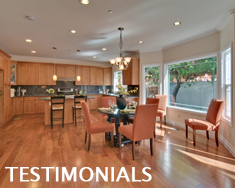
<style>
.page{position:relative;width:235px;height:188px}
.page>*{position:absolute;margin:0}
.t1{font:20px "LucidaSansUnicode";color:#ffffff;font-weight:bold}
</style>
<div class="page">
<p class="t1" style="left:5px;top:167px;width:147px;height:15px">TESTIMONIALS</p>
</div>
